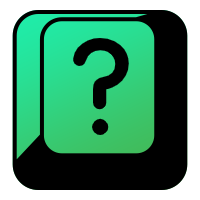
<style>
.page{position:relative;width:200px;height:200px;background:#000000}
.page>*{position:absolute;margin:0}
.t1{font:131px "DXLBaB-KSCpc-EUC-H";color:#000000}
</style>
<div class="page">
<p class="t1" style="left:72px;top:37px;width:57px;height:99px">?</p>
</div>
